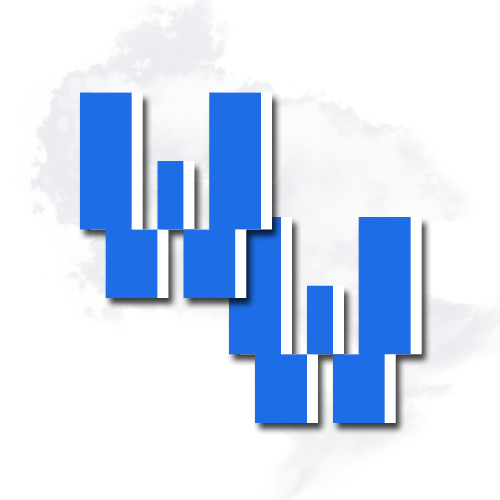
<style>
.page{position:relative;width:500px;height:500px;background:#ffffff}
.page>*{position:absolute;margin:0}
.t1{font:292.2px "Fixedsys";color:#1d6de6;scale:1.13 1}
.t2{font:292.8px "Fixedsys";color:#1d6de6;scale:1.14 1}
</style>
<div class="page">
<p class="t1" style="left:80px;top:92px;width:181px;height:206px">W</p>
<p class="t2" style="left:229px;top:217px;width:182px;height:206px">W</p>
<p class="t2" style="left:240px;top:217px;width:182px;height:206px">W</p>
</div>
